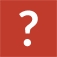
<style>
.page{position:relative;width:57px;height:57px;background:#c03b2b}
.page>*{position:absolute;margin:0}
.t1{font:83px "Lato-Bold";color:#ffffff}
</style>
<div class="page">
<p class="t1" style="left:19px;top:10px;width:19px;height:37px">?</p>
</div>
